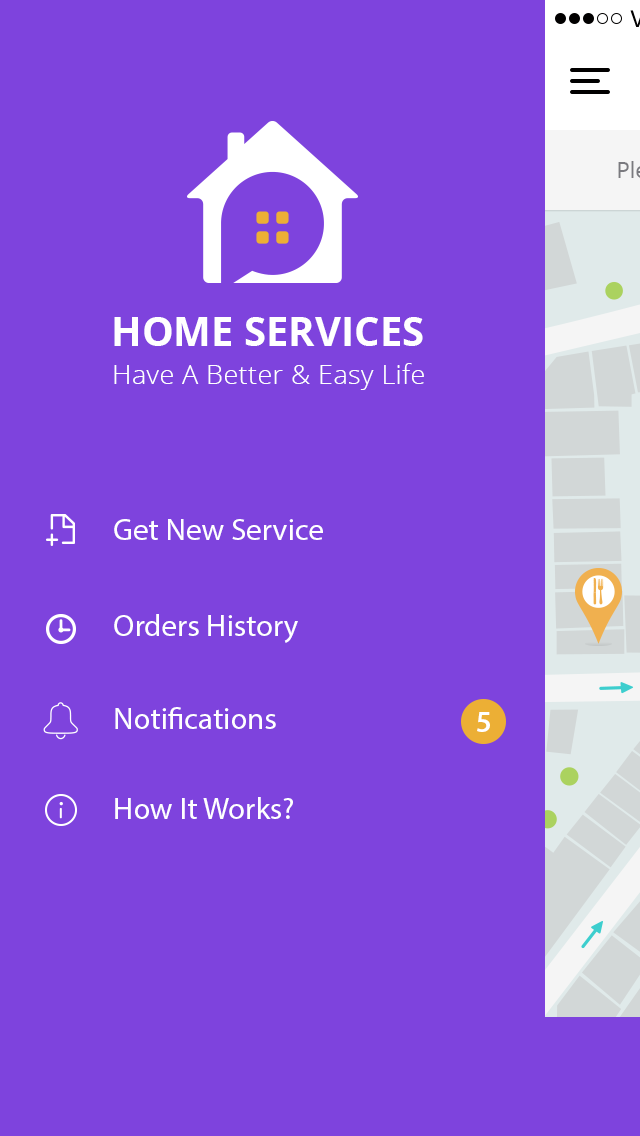
<style>
.page{position:relative;width:640px;height:1136px;background:#7e43dd}
.page>*{position:absolute;margin:0}
.t1{font:40px "OpenSans-Bold";color:#ffffff}
.t2{font:27px "OpenSans-Light";letter-spacing:0.015em;color:#ffffff}
.t3{font:31px "MyriadPro-Regular";color:#ffffff}
.t4{font:30px "MyriadPro-Semibold";color:#ffffff}
</style>
<div class="page">
<p class="t1" style="left:114px;top:317px;width:309px;height:29px">HOME SERVICES</p>
<p class="t2" style="left:114px;top:363px;width:310px;height:27px">Have A Better &amp; Easy Life</p>
<p class="t3" style="left:114px;top:519px;width:209px;height:21px">Get New Service</p>
<p class="t3" style="left:114px;top:614px;width:184px;height:29px">Orders History</p>
<p class="t3" style="left:115px;top:707px;width:161px;height:22px">Notifications</p>
<p class="t4" style="left:477px;top:712px;width:13px;height:20px">5</p>
<p class="t3" style="left:115px;top:797px;width:178px;height:22px">How It Works?</p>
</div>
